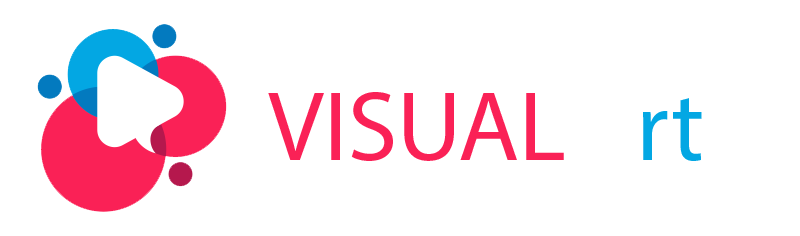
<style>
.page{position:relative;width:800px;height:236px;background:#ffffff}
.page>*{position:absolute;margin:0}
.t1{font:100px "MyriadPro-Regular";color:#fa2156}
.t2{font:100px "MyriadPro-Regular";color:#ffffff}
.t3{font:100px "MyriadPro-Regular";color:#03a7e3}
</style>
<div class="page">
<p class="t1" style="left:268px;top:92px;width:434px;height:69px">VISUAL <span class="t2">a</span><span class="t3">rt</span></p>
</div>
